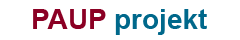
<style>
.page{position:relative;width:240px;height:40px;background:#ffffff}
.page>*{position:absolute;margin:0}
.t1{font:28px "Arial-BoldMT";color:#00688b}
.t2{font:28px "Arial-BoldMT";color:#8b0024}
</style>
<div class="page">
<p class="t1" style="left:33px;top:9px;width:174px;height:26px"><span class="t2">PAUP</span> projekt</p>
</div>
